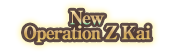
<style>
.page{position:relative;width:175px;height:54px;background:#ffffff}
.page>*{position:absolute;margin:0}
.t1{font:18px "RyuminPro-ExBold";letter-spacing:-0.08em;font-weight:bold}
.t2{font:18px "RyuminPro-ExBold";letter-spacing:-0.08em;color:#d5af69;font-weight:bold}
</style>
<div class="page">
<p class="t1" style="left:70px;top:10px;width:35px;height:15px">New</p>
<p class="t2" style="left:24px;top:25px;width:127px;height:18px">Operation Z Kai</p>
</div>
